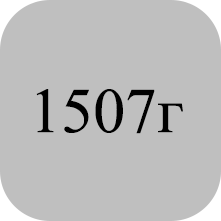
<style>
.page{position:relative;width:221px;height:221px;background:#bfbfbf}
.page>*{position:absolute;margin:0}
.t1{font:63.9px "TimesNewRomanPSMT";color:#000000}
</style>
<div class="page">
<p class="t1" style="left:36px;top:89px;width:147px;height:45px">1507г</p>
</div>
